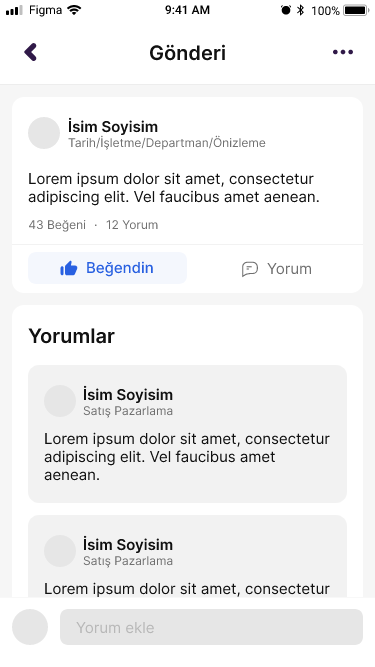
<style>
.page{position:relative;width:375px;height:667px;background:#ffffff}
.page>*{position:absolute;margin:0}
.t1{font:12px "SFProText-Regular";color:#000000}
.t2{font:12px "SFProText-Semibold";color:#000000}
.t3{font:20px "Inter-SemiBold";color:#111111}
.t4{font:15px "Inter-SemiBold";color:#111111}
.t5{font:12px "Inter-Regular";color:#707070}
.t6{font:15px "Inter-Regular";color:#111111}
.t7{font:13px "Inter-Regular";color:#707070}
.t8{font:15px "Inter-Medium";color:#2860e1}
.t9{font:15px "Inter-Regular";color:#707070}
.t10{font:15px "Inter-Regular"}
.t11{font:15px "Inter-Regular";color:#b8b8b8}
</style>
<div class="page">
<p class="t1" style="left:29px;top:5px;width:33px;height:12px">Figma</p>
<p class="t2" style="left:165px;top:5px;width:45px;height:10px">9:41 AM</p>
<p class="t1" style="left:311px;top:6px;width:29px;height:10px">100%</p>
<p class="t3" style="left:150px;top:44px;width:75px;height:17px">Gönderi</p>
<p class="t4" style="left:68px;top:117px;width:90px;height:19px">İsim Soyisim</p>
<p class="t5" style="left:68px;top:135px;width:198px;height:15px">Tarih/İşletme/Departman/Önizleme</p>
<p class="t6" style="left:28px;top:172px;width:291px;height:34px">Lorem ipsum dolor sit amet, consectetur adipiscing elit. Vel faucibus amet aenean.</p>
<p class="t5" style="left:29px;top:220px;width:57px;height:12px">43 Beğeni</p>
<p class="t5" style="left:106px;top:220px;width:52px;height:10px">12 Yorum</p>
<p class="t7" style="left:94px;top:224px;width:3px;height:3px">.</p>
<p class="t8" style="left:87px;top:261px;width:66px;height:16px">Beğendin</p>
<p class="t9" style="left:267px;top:263px;width:44px;height:12px">Yorum</p>
<p class="t3" style="left:28px;top:328px;width:87px;height:16px">Yorumlar</p>
<p class="t4" style="left:83px;top:385px;width:90px;height:19px">İsim Soyisim</p>
<p class="t5" style="left:83px;top:406px;width:90px;height:12px">Satış Pazarlama</p>
<p class="t6" style="left:44px;top:432px;width:286px;height:49px">Lorem ipsum dolor sit amet, consectetur adipiscing elit. Vel faucibus amet aenean.</p>
<p class="t4" style="left:83px;top:535px;width:90px;height:19px">İsim Soyisim</p>
<p class="t5" style="left:83px;top:556px;width:90px;height:12px">Satış Pazarlama</p>
<p class="t10" style="left:44px;top:582px;width:286px;height:49px">Lorem ipsum dolor sit amet, consectetur adipiscing elit. Vel faucibus amet aenean.</p>
<p class="t11" style="left:76px;top:622px;width:78px;height:12px">Yorum ekle</p>
</div>
